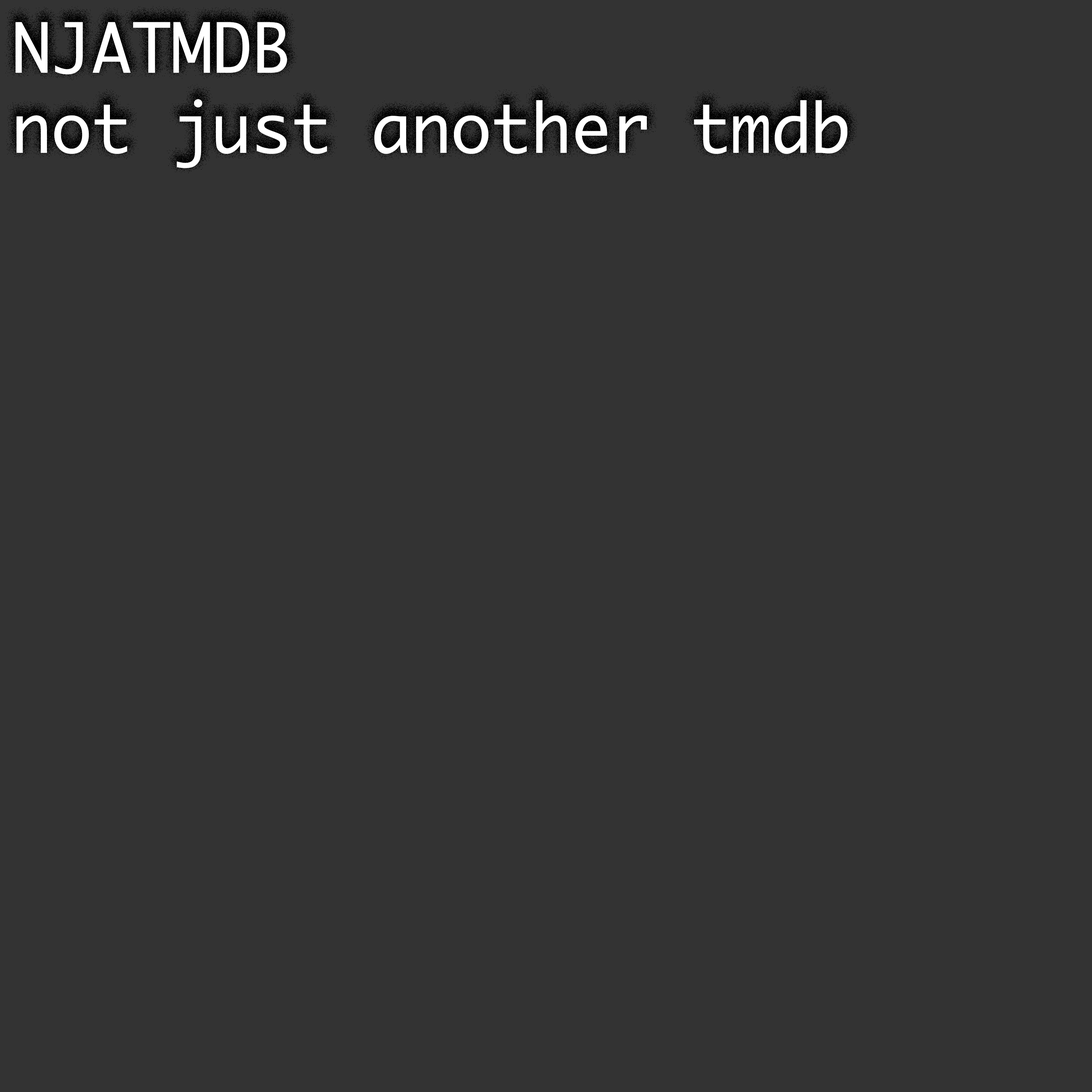
<style>
.page{position:relative;width:1092px;height:1092px;background:#333333}
.page>*{position:absolute;margin:0}
.t1{font:66.7px "Ayuthaya";color:#ffffff}
.t2{font:66.7px "Ayuthaya";color:#ffffff;text-transform:uppercase}
</style>
<div class="page">
<p class="t1" style="left:15px;top:22px;width:832px;height:146px"><span class="t2">NJATMDB<br></span>not just another tmdb</p>
</div>
